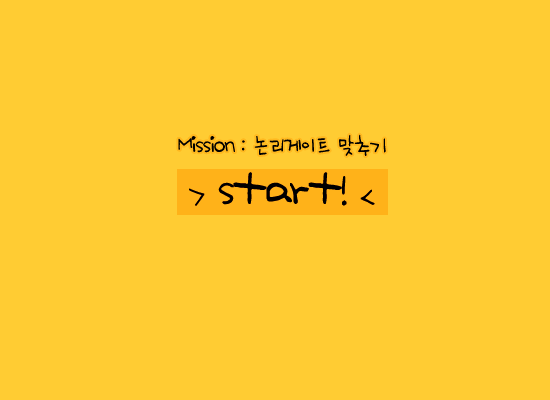
<style>
.page{position:relative;width:550px;height:400px;background:#ffcc33}
.page>*{position:absolute;margin:0}
.t1{font:24px "Na@Sanha";letter-spacing:-0.05em;color:#000000;scale:0.9 1}
.t2{font:48px "Na@Sanha";letter-spacing:-0.05em;color:#000000;scale:0.9 1}
.t3{font:30px "Na@Sanha";letter-spacing:-0.05em;color:#000000;scale:0.9 1}
</style>
<div class="page">
<p class="t1" style="left:178px;top:134px;width:208px;height:22px">Mission : 논리게이트 맞추기</p>
<p class="t2" style="left:189px;top:172px;width:186px;height:34px"><span class="t3">&gt;</span> start! <span class="t3">&lt;</span></p>
</div>
